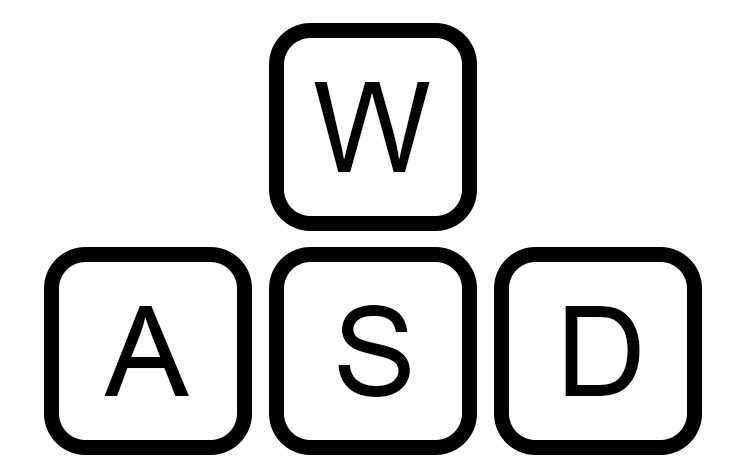
<style>
.page{position:relative;width:734px;height:474px;background:#ffffff}
.page>*{position:absolute;margin:0}
.t1{font:125px "ArialMT";color:#000000}
</style>
<div class="page">
<p class="t1" style="left:314px;top:82px;width:116px;height:90px">W</p>
<p class="t1" style="left:338px;top:305px;width:72px;height:92px">S</p>
<p class="t1" style="left:104px;top:306px;width:85px;height:90px">A</p>
<p class="t1" style="left:565px;top:306px;width:75px;height:90px">D</p>
</div>
